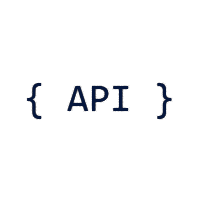
<style>
.page{position:relative;width:200px;height:200px;background:#ffffff}
.page>*{position:absolute;margin:0}
.t1{font:39px "Consolas";color:#06173d}
</style>
<div class="page">
<p class="t1" style="left:27px;top:83px;width:145px;height:36px">{ API }</p>
</div>
